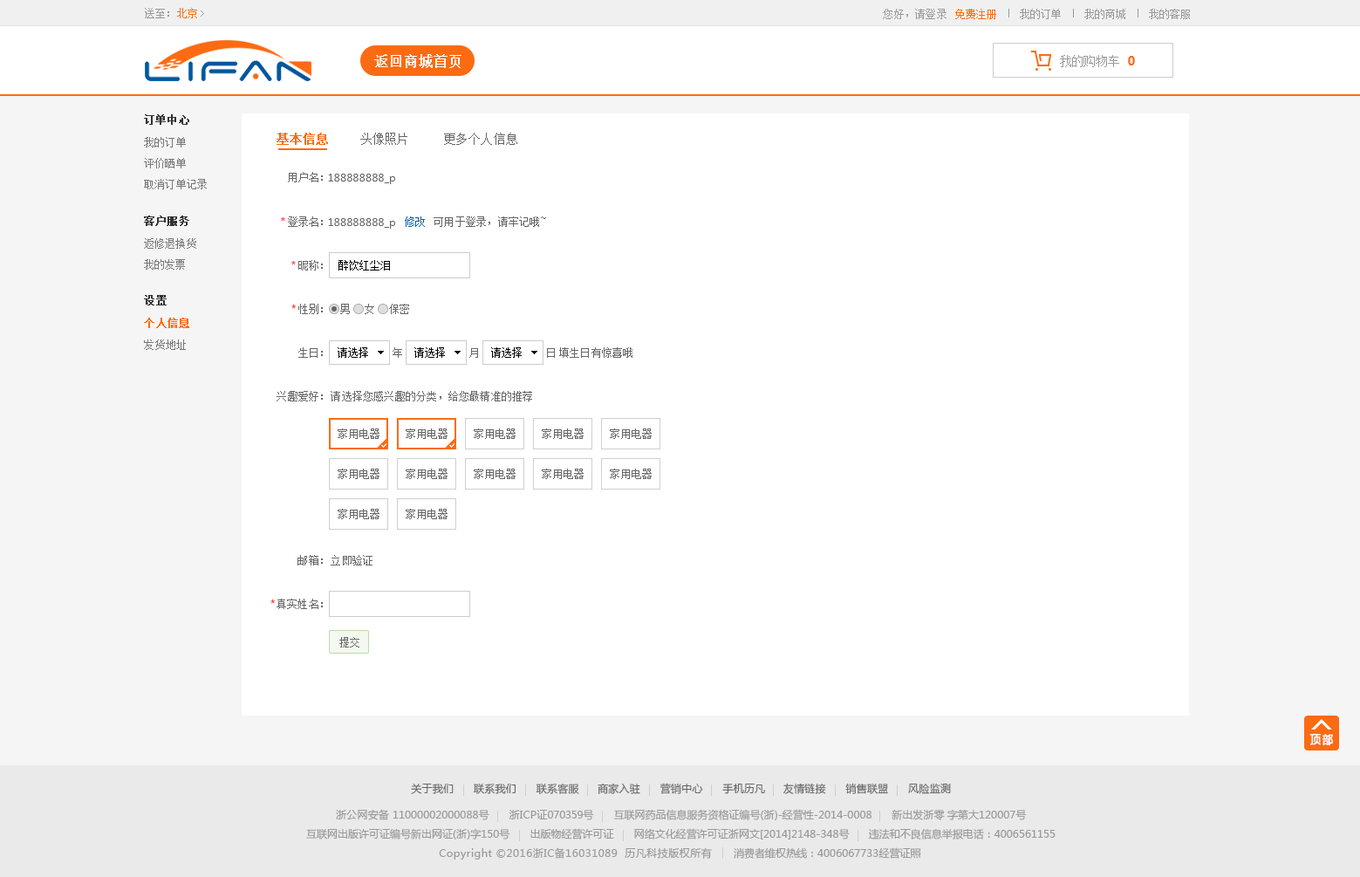
<style>
.page{position:relative;width:1360px;height:877px;background:#ffffff}
.page>*{position:absolute;margin:0}
.t1{font:10.3px "SimSun";letter-spacing:0.02em;color:#999999}
.t2{font:10.3px "SimSun";letter-spacing:0.02em;color:#fc6b12}
.t3{font:10.7px "SimSun";letter-spacing:0.02em;color:#999999}
.t4{font:10.7px "SimSun";letter-spacing:0.02em;color:#fc6b12}
.t5{font:14px "SimSun";color:#ffffff;font-weight:bold}
.t6{font:12.2px "SimSun";letter-spacing:-0.06em;color:#999999}
.t7{font:12.2px "MicrosoftYaHei-Bold";letter-spacing:-0.06em;color:#fc6b12}
.t8{font:10.5px "SimSun";color:#333333;font-weight:bold}
.t9{font:10.5px "SimSun";color:#777777}
.t10{font:12.2px "SimSun";letter-spacing:0.02em;color:#fc6b12;font-weight:bold}
.t11{font:12.2px "SimSun";letter-spacing:0.02em;color:#666666}
.t12{font:10.5px "SimSun";letter-spacing:0.02em;color:#666666}
.t13{font:10.5px "MicrosoftYaHei";letter-spacing:0.02em;color:#666666}
.t14{font:10.5px "MicrosoftYaHei";letter-spacing:0.02em;color:#ff0000}
.t15{font:10.5px "SimSun";letter-spacing:0.02em;color:#005ea7}
.t16{font:10.5px "SimSun";letter-spacing:0.02em;color:#000000}
.t17{font:10.6px "SimSun";color:#333333;font-weight:bold}
.t18{font:10.5px "MicrosoftYaHei";letter-spacing:0.02em}
.t19{font:10.6px "SimSun";color:#fc6b12;font-weight:bold}
.t20{font:10.6px "SimSun";color:#777777}
.t21{font:11.5px "MicrosoftYaHei";color:#ffffff;font-weight:bold;scale:0.91 1}
.t22{font:10.5px "MicrosoftYaHei";color:#999999}
.t23{font:10.5px "MicrosoftYaHei";letter-spacing:0.02em;color:#999999}
.t24{font:10.5px "MicrosoftYaHei";letter-spacing:-0.02em;color:#999999}
.t25{font:10.5px "MicrosoftYaHei";letter-spacing:0.04em;color:#999999}
</style>
<div class="page">
<p class="t1" style="left:145px;top:8px;width:52px;height:10px">送至：<span class="t2">北京</span></p>
<p class="t3" style="left:883px;top:9px;width:64px;height:10px">您好，请登录</p>
<p class="t4" style="left:955px;top:9px;width:41px;height:10px">免费注册</p>
<p class="t3" style="left:1020px;top:9px;width:41px;height:10px">我的订单</p>
<p class="t3" style="left:1084px;top:9px;width:41px;height:10px">我的商城</p>
<p class="t3" style="left:1149px;top:9px;width:41px;height:10px">我的客服</p>
<p class="t5" style="left:374px;top:54px;width:87px;height:14px">返回商城首页</p>
<p class="t6" style="left:1060px;top:55px;width:59px;height:12px">我的购物车</p>
<p class="t7" style="left:1128px;top:56px;width:7px;height:9px">0</p>
<p class="t8" style="left:144px;top:114px;width:45px;height:11px">订单中心</p>
<p class="t9" style="left:144px;top:137px;width:42px;height:10px">我的订单</p>
<p class="t10" style="left:277px;top:133px;width:51px;height:12px">基本信息</p>
<p class="t11" style="left:360px;top:133px;width:47px;height:12px">头像照片</p>
<p class="t11" style="left:444px;top:133px;width:73px;height:12px">更多个人信息</p>
<p class="t9" style="left:144px;top:158px;width:42px;height:10px">评价晒单</p>
<p class="t12" style="left:288px;top:172px;width:35px;height:10px">用户名：</p>
<p class="t13" style="left:328px;top:174px;width:67px;height:10px">188888888_p</p>
<p class="t9" style="left:144px;top:179px;width:63px;height:10px">取消订单记录</p>
<p class="t8" style="left:144px;top:215px;width:45px;height:11px">客户服务</p>
<p class="t14" style="left:281px;top:217px;width:4px;height:4px">*</p>
<p class="t12" style="left:288px;top:216px;width:35px;height:11px">登录名：</p>
<p class="t13" style="left:328px;top:218px;width:67px;height:11px">188888888_p</p>
<p class="t15" style="left:405px;top:216px;width:20px;height:11px">修改</p>
<p class="t12" style="left:434px;top:216px;width:112px;height:11px">可用于登录，请牢记哦~</p>
<p class="t9" style="left:144px;top:238px;width:52px;height:11px">返修退换货</p>
<p class="t9" style="left:144px;top:259px;width:41px;height:11px">我的发票</p>
<p class="t14" style="left:291px;top:261px;width:5px;height:3px">*</p>
<p class="t12" style="left:298px;top:260px;width:25px;height:10px">昵称：</p>
<p class="t16" style="left:338px;top:260px;width:52px;height:10px">醉饮红尘泪</p>
<p class="t17" style="left:144px;top:295px;width:23px;height:10px">设置</p>
<p class="t18" style="left:291px;top:304px;width:5px;height:5px">*</p>
<p class="t12" style="left:298px;top:304px;width:25px;height:10px">性别：</p>
<p class="t12" style="left:340px;top:304px;width:10px;height:10px">男</p>
<p class="t12" style="left:365px;top:304px;width:9px;height:10px">女</p>
<p class="t12" style="left:389px;top:304px;width:20px;height:10px">保密</p>
<p class="t19" style="left:144px;top:318px;width:45px;height:10px">个人信息</p>
<p class="t20" style="left:144px;top:339px;width:42px;height:11px">发货地址</p>
<p class="t12" style="left:298px;top:347px;width:25px;height:11px">生日：</p>
<p class="t16" style="left:338px;top:347px;width:30px;height:11px">请选择</p>
<p class="t12" style="left:393px;top:347px;width:9px;height:11px">年</p>
<p class="t16" style="left:414px;top:347px;width:31px;height:11px">请选择</p>
<p class="t12" style="left:469px;top:348px;width:9px;height:10px">月</p>
<p class="t16" style="left:491px;top:347px;width:31px;height:11px">请选择</p>
<p class="t12" style="left:547px;top:348px;width:8px;height:10px">日</p>
<p class="t12" style="left:559px;top:347px;width:73px;height:11px">填生日有惊喜哦</p>
<p class="t12" style="left:277px;top:391px;width:46px;height:10px">兴趣爱好：</p>
<p class="t12" style="left:331px;top:391px;width:201px;height:10px">请选择您感兴趣的分类，给您最精准的推荐</p>
<p class="t12" style="left:338px;top:428px;width:41px;height:11px">家用电器</p>
<p class="t12" style="left:406px;top:428px;width:42px;height:11px">家用电器</p>
<p class="t12" style="left:474px;top:428px;width:42px;height:11px">家用电器</p>
<p class="t12" style="left:542px;top:428px;width:42px;height:11px">家用电器</p>
<p class="t12" style="left:610px;top:428px;width:42px;height:11px">家用电器</p>
<p class="t12" style="left:338px;top:468px;width:41px;height:11px">家用电器</p>
<p class="t12" style="left:406px;top:468px;width:42px;height:11px">家用电器</p>
<p class="t12" style="left:474px;top:468px;width:42px;height:11px">家用电器</p>
<p class="t12" style="left:542px;top:468px;width:42px;height:11px">家用电器</p>
<p class="t12" style="left:610px;top:468px;width:42px;height:11px">家用电器</p>
<p class="t12" style="left:338px;top:509px;width:41px;height:10px">家用电器</p>
<p class="t12" style="left:406px;top:509px;width:42px;height:10px">家用电器</p>
<p class="t12" style="left:297px;top:555px;width:26px;height:10px">邮箱：</p>
<p class="t12" style="left:331px;top:555px;width:42px;height:10px">立即验证</p>
<p class="t18" style="left:270px;top:598px;width:5px;height:6px">*</p>
<p class="t12" style="left:277px;top:598px;width:46px;height:11px">真实姓名：</p>
<p class="t12" style="left:339px;top:637px;width:20px;height:10px">提交</p>
<p class="t21" style="left:1309px;top:734px;width:25px;height:12px">顶 部</p>
<p class="t13" style="left:411px;top:783px;width:540px;height:11px">关于我们      联系我们      联系客服     商家入驻      营销中心      手机历凡     友情链接      销售联盟      风险监测</p>
<p class="t22" style="left:336px;top:809px;width:691px;height:11px"><span class="t23">浙公网安备 </span>11000002000088<span class="t23">号      浙ICP证</span><span class="t24">070359号     </span>互联网药品信息服务资格证编号(<span class="t23">浙</span>)-经营性-2014-0008      新出发<span class="t23">浙</span>零 字第大120007号</p>
<p class="t22" style="left:306px;top:828px;width:750px;height:11px">互联网出版许可证编号新出网证(<span class="t23">浙</span>)字150号       出版物经营许可证       网络文化经营许可证<span class="t23">浙</span>网文[2014]2148-348号       违法和不良信息举报电话：4006561155</p>
<p class="t25" style="left:439px;top:847px;width:482px;height:12px"><span class="t22"><br><br></span>Copyright ©2016浙IC备16031089  历凡科技版权所有<span class="t22">       消费者维权热线：4006067733经营证照</span></p>
</div>
